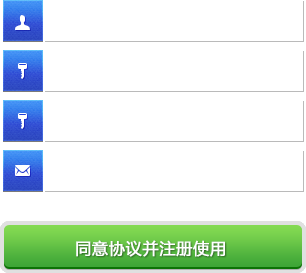
<style>
.page{position:relative;width:306px;height:273px;background:#ffffff}
.page>*{position:absolute;margin:0}
.t1{font:16px "MicrosoftYaHei";letter-spacing:0.025em;color:#ffffff;font-weight:bold}
</style>
<div class="page">
<p class="t1" style="left:76px;top:240px;width:149px;height:17px">同意协议并注册使用</p>
</div>
